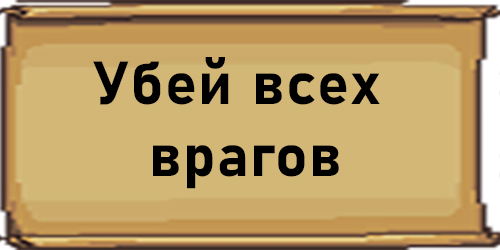
<style>
.page{position:relative;width:500px;height:250px;background:#d2b777}
.page>*{position:absolute;margin:0}
.t1{font:60px "Bahnschrift-Bold";letter-spacing:0.025em;color:#000000;font-weight:bold}
</style>
<div class="page">
<p class="t1" style="left:93px;top:57px;width:287px;height:132px;text-align:center">Убей всех<br> врагов</p>
</div>
